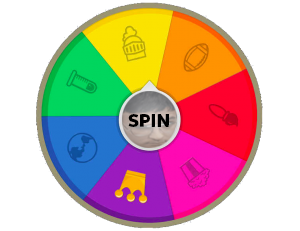
<style>
.page{position:relative;width:300px;height:231px;background:#ffffff}
.page>*{position:absolute;margin:0}
.t1{font:18.6px "MikadoBoldDEMO";color:#000000}
</style>
<div class="page">
<p class="t1" style="left:128px;top:114px;width:41px;height:13px">SPIN</p>
</div>
